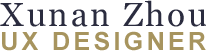
<style>
.page{position:relative;width:206px;height:52px;background:#ffffff}
.page>*{position:absolute;margin:0}
.t1{font:33.3px "Georgia";letter-spacing:0.075em;color:#2b2c3f}
.t2{font:25px "Arial-BoldMT";letter-spacing:0.135em;color:#a7945e}
</style>
<div class="page">
<p class="t1" style="left:0px;top:0px;width:207px;height:27px">Xunan Zhou</p>
<p class="t2" style="left:2px;top:31px;width:204px;height:20px">UX DESIGNER</p>
</div>
